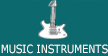
<style>
.page{position:relative;width:108px;height:56px;background:#0c696e}
.page>*{position:absolute;margin:0}
.t1{font:11.1px "Verdana";color:#fdfef9;scale:0.87 1}
.t2{font:11.1px "Microsoft-Yi-Baiti";color:#fdfef9;scale:0.87 1}
</style>
<div class="page">
<p class="t1" style="left:1px;top:44px;width:107px;height:10px"><span class="t2">   </span>MUSIC INSTRUMENTS</p>
</div>
